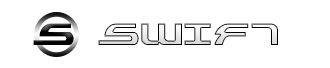
<style>
.page{position:relative;width:330px;height:68px;background:#ffffff}
.page>*{position:absolute;margin:0}
.t1{font:50px "Alexis";color:#000000}
.t2{font:50px "Alexis"}
</style>
<div class="page">
<p class="t1" style="left:33px;top:23px;width:41px;height:22px">S</p>
<p class="t2" style="left:98px;top:23px;width:180px;height:22px">SWIFT</p>
</div>
